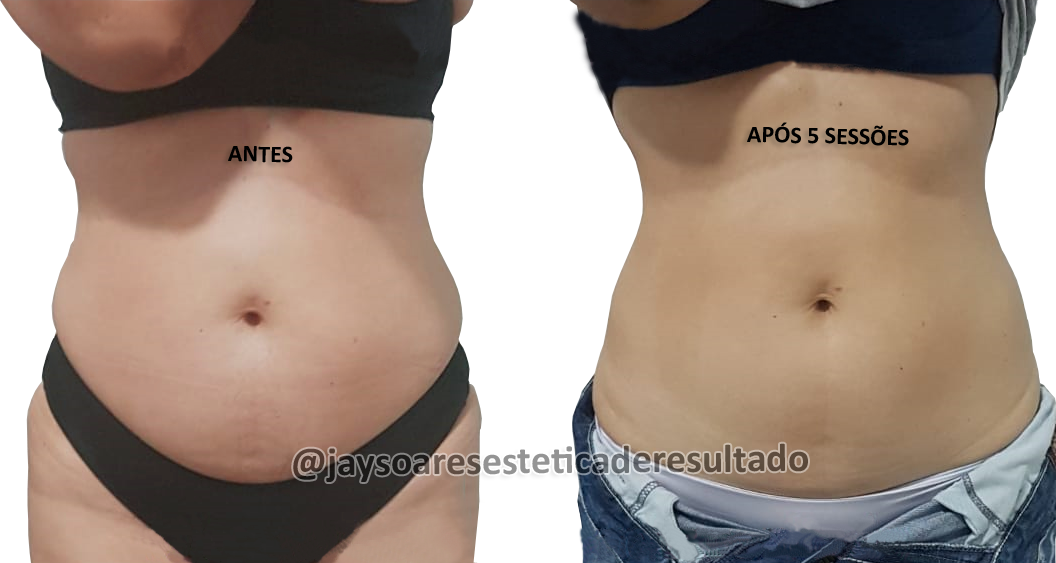
<style>
.page{position:relative;width:1056px;height:563px;background:#ffffff}
.page>*{position:absolute;margin:0}
.t1{font:24px "Calibri-Bold";color:#000000}
.t2{font:40px "Calibri-Bold"}
</style>
<div class="page">
<p class="t1" style="left:747px;top:122px;width:162px;height:24px;rotate:1deg">APÓS 5 SESSÕES</p>
<p class="t1" style="left:228px;top:146px;width:65px;height:17px;rotate:1deg">ANTES</p>
<p class="t2" style="left:293px;top:443px;width:515px;height:39px">@jaysoaresesteticaderesultado</p>
</div>
